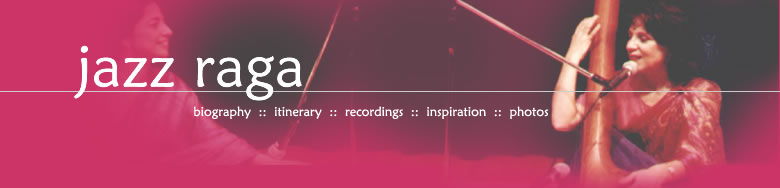
<style>
.page{position:relative;width:780px;height:188px}
.page>*{position:absolute;margin:0}
.t1{font:13px "MaiandraGD-Regular";color:#ffffff}
</style>
<div class="page">
<p class="t1" style="left:194px;top:106px;width:355px;height:13px">biography  ::  itinerary  ::  recordings  ::  inspiration  ::  photos</p>
</div>
